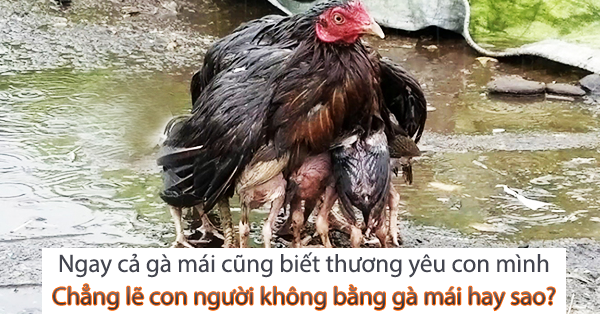
<style>
.page{position:relative;width:600px;height:314px}
.page>*{position:absolute;margin:0}
.t1{font:25px "MyriadPro-Regular";color:#43454f}
.t2{font:12px "MyriadPro-Regular";color:#43454f}
</style>
<div class="page">
<p class="t1" style="left:59px;top:252px;width:490px;height:26px">Ngay cả gà mái cũng biết thương yêu con mình</p>
<p class="t2" style="left:53px;top:284px;width:502px;height:27px;text-align:center">Chẳng lẽ con người không bằng gà mái hay sao?</p>
</div>
